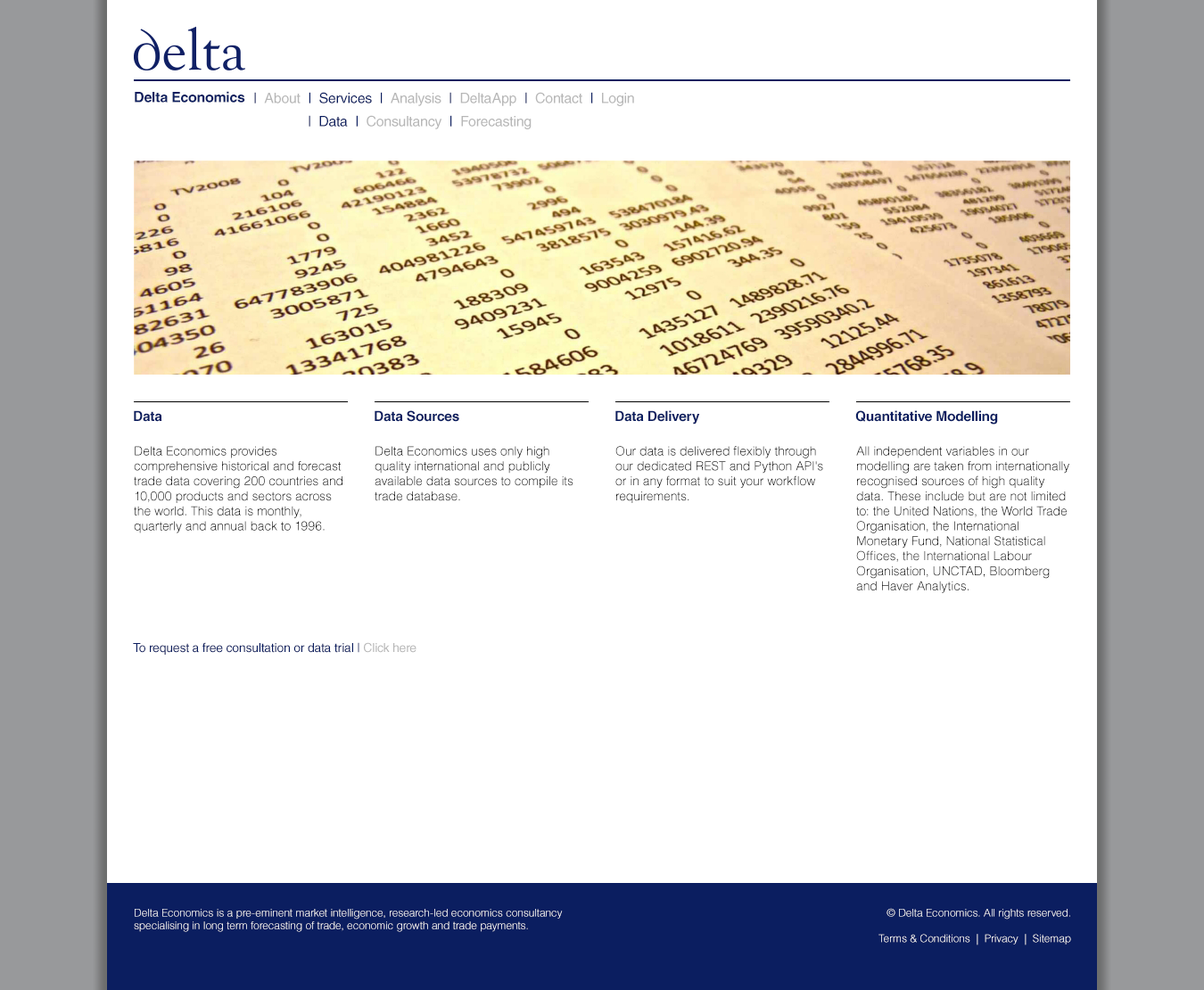
<style>
.page{position:relative;width:1204px;height:990px;background:#ffffff}
.page>*{position:absolute;margin:0}
.t1{font:14.3px "HelveticaLTStd-Bold";letter-spacing:-0.015em;color:#0b1e60}
.t2{font:14.3px "HelveticaLTStd-Roman";letter-spacing:-0.015em;color:#0b1e60}
.t3{font:14.3px "HelveticaLTStd-Roman";letter-spacing:-0.015em;color:#b7b7b7}
.t4{font:13.8px "HelveticaLTStd-Bold";letter-spacing:-0.015em;color:#0b1e60}
.t5{font:12.5px "HelveticaLTStd-Light";color:#000000}
.t6{font:12.5px "HelveticaLTStd-Roman";letter-spacing:-0.015em;color:#0b1e60}
.t7{font:12.5px "HelveticaLTStd-Roman";letter-spacing:-0.015em;color:#b7b7b7}
.t8{font:10.7px "HelveticaLTStd-Light";color:#ffffff}
</style>
<div class="page">
<p class="t1" style="left:135px;top:91px;width:110px;height:12px">Delta Economics</p>
<p class="t2" style="left:254px;top:92px;width:380px;height:14px">|  <span class="t3">About  </span>|  Services  |  <span class="t3">Analysis  </span>|  <span class="t3">DeltaApp  </span>|  <span class="t3">Contact  </span>|  <span class="t3">Login</span></p>
<p class="t3" style="left:309px;top:115px;width:223px;height:14px"><span class="t2">|  Data  |</span>  Consultancy  <span class="t2">|</span>  Forecasting</p>
<p class="t4" style="left:134px;top:410px;width:28px;height:12px">Data</p>
<p class="t4" style="left:375px;top:410px;width:84px;height:12px">Data Sources</p>
<p class="t4" style="left:616px;top:410px;width:84px;height:15px">Data Delivery</p>
<p class="t4" style="left:855px;top:410px;width:143px;height:15px">Quantitative Modelling</p>
<p class="t5" style="left:134px;top:446px;width:209px;height:87px">Delta Economics provides comprehensive historical and forecast trade data covering 200 countries and 10,000 products and sectors across the world. This data is monthly, quarterly and annual back to 1996.</p>
<p class="t5" style="left:375px;top:446px;width:199px;height:55px">Delta Economics uses only high quality international and publicly available data sources to compile its trade database.</p>
<p class="t5" style="left:616px;top:446px;width:207px;height:57px">Our data is delivered flexibly through our dedicated REST and Python API's or in any format to suit your workflow requirements.</p>
<p class="t5" style="left:856px;top:446px;width:214px;height:147px">All independent variables in our modelling are taken from internationally recognised sources of high quality data. These include but are not limited to: the United Nations, the World Trade Organisation, the International Monetary Fund, National Statistical Offices, the International Labour Organisation, UNCTAD, Bloomberg and Haver Analytics.</p>
<p class="t6" style="left:133px;top:642px;width:284px;height:13px">To request a free consultation or data trial | <span class="t7">Click here</span></p>
<p class="t8" style="left:134px;top:909px;width:429px;height:23px">Delta Economics is a pre-eminent market intelligence, research-led economics consultancy<br>specialising in long term forecasting of trade, economic growth and trade payments.</p>
<p class="t8" style="left:879px;top:908px;width:192px;height:38px;text-align:right">© Delta Economics. All rights reserved.<br><br>Terms &amp; Conditions  |  Privacy  |  Sitemap</p>
</div>
